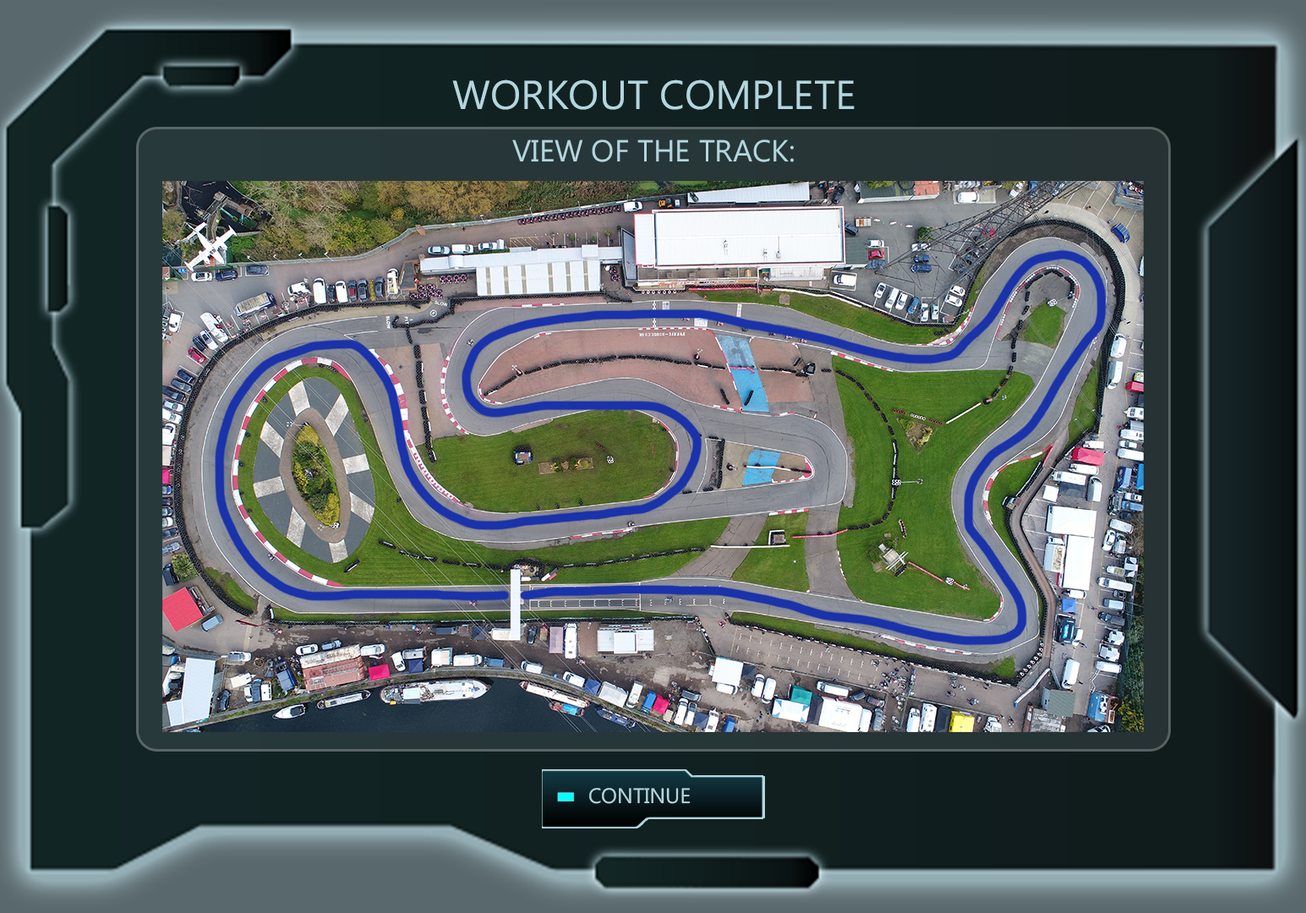
<style>
.page{position:relative;width:1306px;height:913px}
.page>*{position:absolute;margin:0}
.t1{font:40.6px "MicrosoftPhagsPa";color:#b3d6df}
.t2{font:30.4px "MicrosoftPhagsPa";color:#b3d6df}
</style>
<div class="page">
<p class="t1" style="left:452px;top:79px;width:403px;height:31px">WORKOUT COMPLETE</p>
<p class="t2" style="left:512px;top:139px;width:282px;height:23px">VIEW OF THE TRACK:</p>
</div>
